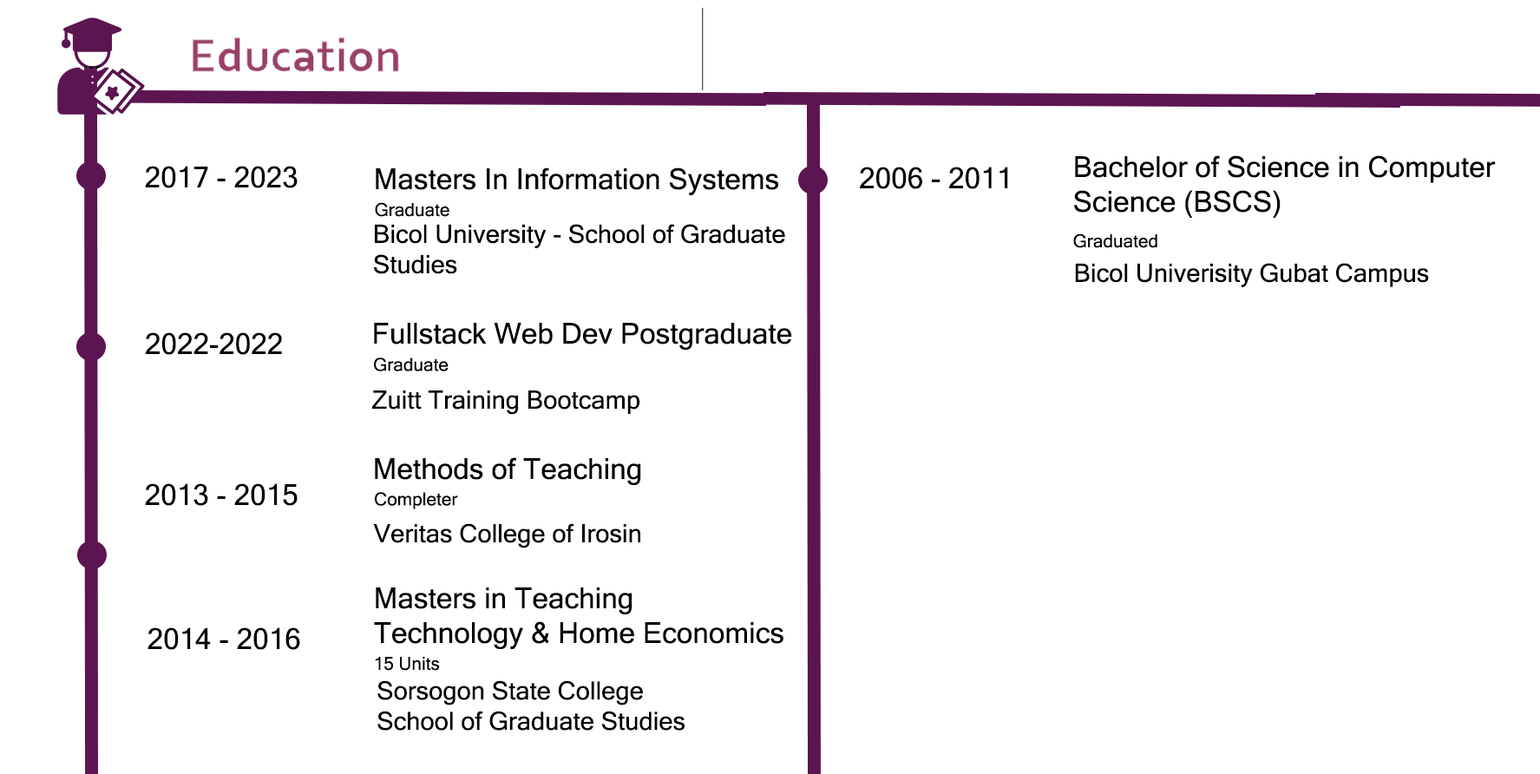
<style>
.page{position:relative;width:1540px;height:774px;background:#ffffff}
.page>*{position:absolute;margin:0}
.t1{font:28.9px "MicrosoftSansSerif";color:#000000}
.t2{font:18.1px "MicrosoftSansSerif";color:#000000}
.t3{font:25.3px "MicrosoftSansSerif";color:#000000}
</style>
<div class="page">
<p class="t1" style="left:1074px;top:155px;width:422px;height:63px">Bachelor of Science in Computer<br>Science (BSCS)</p>
<p class="t1" style="left:145px;top:166px;width:153px;height:22px">2017 - 2023</p>
<p class="t1" style="left:376px;top:167px;width:402px;height:28px">Masters In Information Systems</p>
<p class="t1" style="left:860px;top:167px;width:148px;height:22px">2006 - 2011</p>
<p class="t2" style="left:375px;top:202px;width:75px;height:15px">Graduate</p>
<p class="t3" style="left:374px;top:224px;width:411px;height:50px">Bicol University - School of Graduate <br>Studies</p>
<p class="t2" style="left:1074px;top:233px;width:84px;height:15px">Graduated</p>
<p class="t3" style="left:1075px;top:263px;width:354px;height:24px">Bicol Univerisity Gubat Campus</p>
<p class="t1" style="left:374px;top:323px;width:418px;height:27px">Fullstack Web Dev Postgraduate</p>
<p class="t1" style="left:145px;top:332px;width:137px;height:23px">2022-2022</p>
<p class="t2" style="left:374px;top:358px;width:75px;height:13px">Graduate</p>
<p class="t3" style="left:372px;top:391px;width:268px;height:24px">Zuitt Training Bootcamp</p>
<p class="t1" style="left:375px;top:457px;width:266px;height:28px">Methods of Teaching</p>
<p class="t1" style="left:145px;top:483px;width:153px;height:23px">2013 - 2015</p>
<p class="t2" style="left:375px;top:492px;width:83px;height:17px">Completer</p>
<p class="t3" style="left:373px;top:523px;width:267px;height:25px">Veritas College of Irosin</p>
<p class="t1" style="left:374px;top:588px;width:410px;height:61px">Masters in Teaching<br>Technology &amp; Home Economics</p>
<p class="t1" style="left:148px;top:627px;width:152px;height:23px">2014 - 2016</p>
<p class="t2" style="left:375px;top:656px;width:65px;height:15px">15 Units</p>
<p class="t3" style="left:378px;top:680px;width:307px;height:51px">Sorsogon State College <br>School of Graduate Studies</p>
</div>
